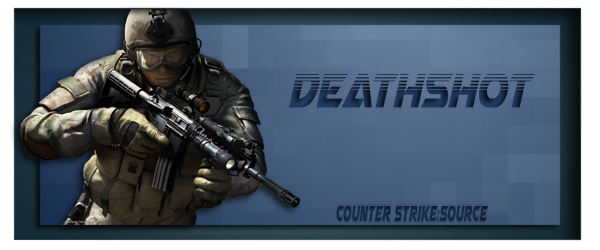
<style>
.page{position:relative;width:600px;height:250px}
.page>*{position:absolute;margin:0}
.t1{font:66.9px "AirstrikeHalf-Tone";scale:0.62 1}
.t2{font:33.3px "AirstrikeAcademy";color:#14243c;scale:0.37 1}
</style>
<div class="page">
<p class="t1" style="left:289px;top:74px;width:246px;height:34px">Deathshot</p>
<p class="t2" style="left:336px;top:204px;width:153px;height:19px">Counter Strike:Source</p>
</div>
